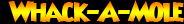
<style>
.page{position:relative;width:184px;height:24px;background:#000000}
.page>*{position:absolute;margin:0}
.t1{font:26.3px "Shermlock";letter-spacing:-0.05em;scale:1.36 1}
</style>
<div class="page">
<p class="t1" style="left:8px;top:0px;width:176px;height:23px">Whack-A-Mole</p>
</div>
